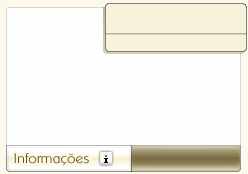
<style>
.page{position:relative;width:248px;height:174px;background:#fefefe}
.page>*{position:absolute;margin:0}
.t1{font:13.9px "SharnayExtralight";color:#685518}
</style>
<div class="page">
<p class="t1" style="left:14px;top:153px;width:75px;height:13px">Informações</p>
</div>
